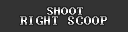
<style>
.page{position:relative;width:128px;height:32px;background:#333333}
.page>*{position:absolute;margin:0}
.t1{font:14px "Terminal"}
</style>
<div class="page">
<p class="t1" style="left:20px;top:16px;width:87px;height:9px">RIGHT SCOOP</p>
</div>
